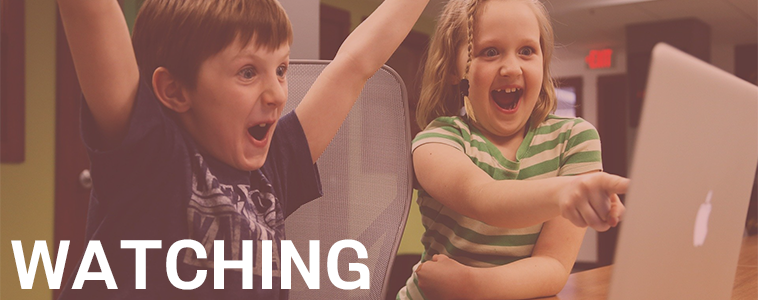
<style>
.page{position:relative;width:758px;height:300px}
.page>*{position:absolute;margin:0}
.t1{font:66px "TTDarakbangR";color:#ffffff;scale:1.09 1}
</style>
<div class="page">
<p class="t1" style="left:11px;top:239px;width:359px;height:51px">WATCHING</p>
</div>
